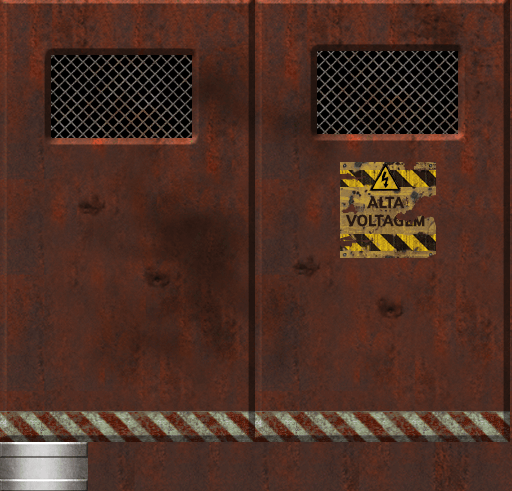
<style>
.page{position:relative;width:512px;height:491px}
.page>*{position:absolute;margin:0}
.t1{font:16px/18.7px "Muli-ExtraBold";color:#261711;text-transform:uppercase;font-weight:bold;scale:0.88 1}
</style>
<div class="page">
<p class="t1" style="left:345px;top:196px;width:80px;height:31px;text-align:center">alta<br>voltagem</p>
</div>
